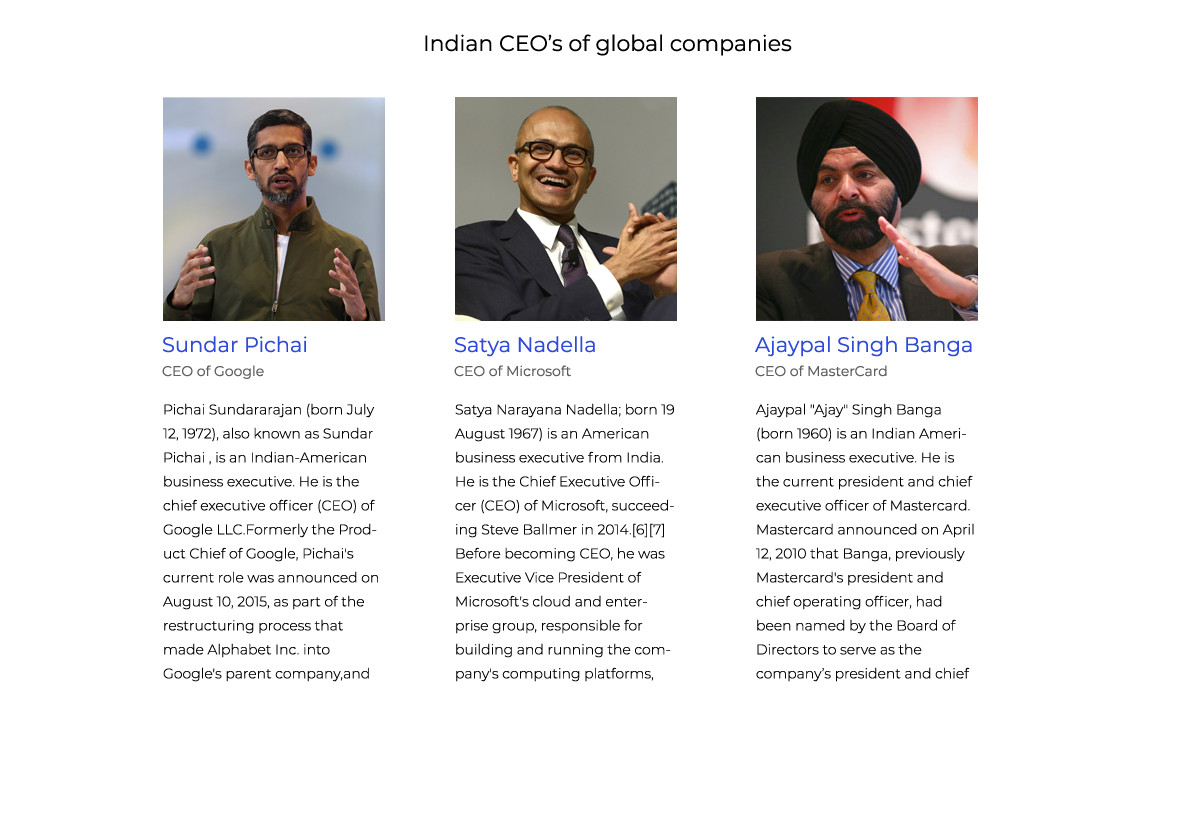
<style>
.page{position:relative;width:1200px;height:840px;background:#ffffff}
.page>*{position:absolute;margin:0}
.t1{font:22px "Montserrat-Regular";color:#000000}
.t2{font:21px/24px "Montserrat-Regular";color:#2e4ad6}
.t3{font:14px/24px "Montserrat-Regular";color:#5f5f5f}
.t4{font:14px/24px "Montserrat-Light";color:#000000}
</style>
<div class="page">
<p class="t1" style="left:425px;top:34px;width:367px;height:22px">Indian CEO’s of global companies</p>
<p class="t2" style="left:162px;top:336px;width:145px;height:43px">Sundar Pichai<br><span class="t3">CEO of Google</span></p>
<p class="t3" style="left:454px;top:336px;width:141px;height:41px"><span class="t2">Satya Nadella<br></span>CEO of Microsoft</p>
<p class="t2" style="left:755px;top:336px;width:217px;height:41px">Ajaypal Singh Banga<br><span class="t3">CEO of MasterCard</span></p>
<p class="t4" style="left:163px;top:403px;width:215px;height:279px">Pichai Sundararajan (born July 12, 1972), also known as Sundar Pichai , is an Indian-American business executive. He is the chief executive officer (CEO) of Google LLC.Formerly the Product Chief of Google, Pichai's current role was announced on August 10, 2015, as part of the restructuring process that made Alphabet Inc. into Google's parent company,and he assumed the position on October 2, 2015.</p>
<p class="t4" style="left:455px;top:403px;width:219px;height:279px">Satya Narayana Nadella; born 19 August 1967) is an American business executive from India. He is the Chief Executive Officer (CEO) of Microsoft, succeeding Steve Ballmer in 2014.[6][7] Before becoming CEO, he was Executive Vice President of Microsoft's cloud and enterprise group, responsible for building and running the company's computing platforms, developer tools and cloud computing services.</p>
<p class="t4" style="left:756px;top:403px;width:218px;height:279px">Ajaypal "Ajay" Singh Banga (born 1960) is an Indian American business executive. He is the current president and chief executive officer of Mastercard. Mastercard announced on April 12, 2010 that Banga, previously Mastercard's president and chief operating officer, had been named by the Board of Directors to serve as the company’s president and chief executive officer, effective July 1, 2010.</p>
</div>
